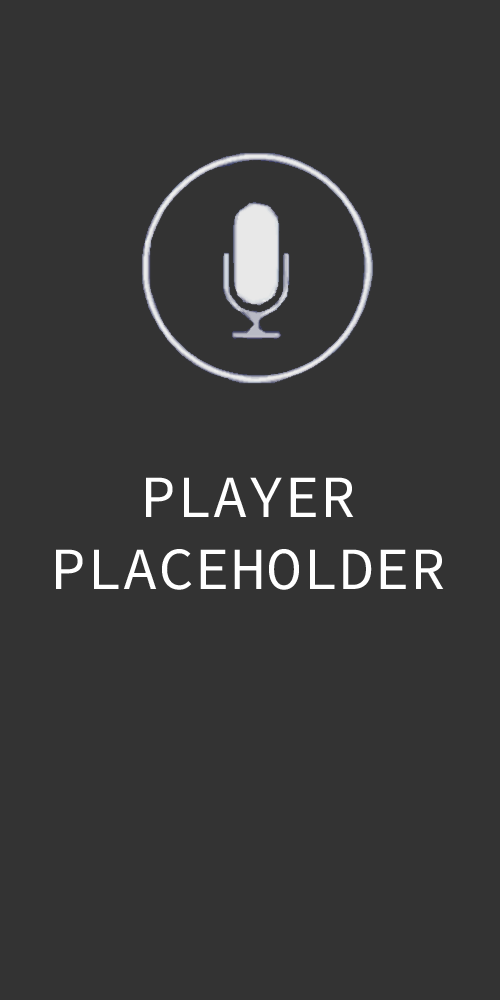
<style>
.page{position:relative;width:500px;height:1000px;background:#333333}
.page>*{position:absolute;margin:0}
.t1{font:60px "SourceCodeVariable-Roman";color:#ffffff}
</style>
<div class="page">
<p class="t1" style="left:56px;top:477px;width:388px;height:113px;text-align:center">PLAYER<br>PLACEHOLDER</p>
</div>
